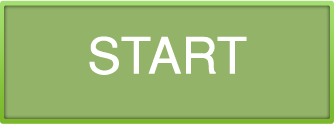
<style>
.page{position:relative;width:334px;height:124px;background:#93b468}
.page>*{position:absolute;margin:0}
.t1{font:50px "Helvetica-Normal";color:#ffffff}
</style>
<div class="page">
<p class="t1" style="left:89px;top:36px;width:158px;height:39px">START</p>
</div>
